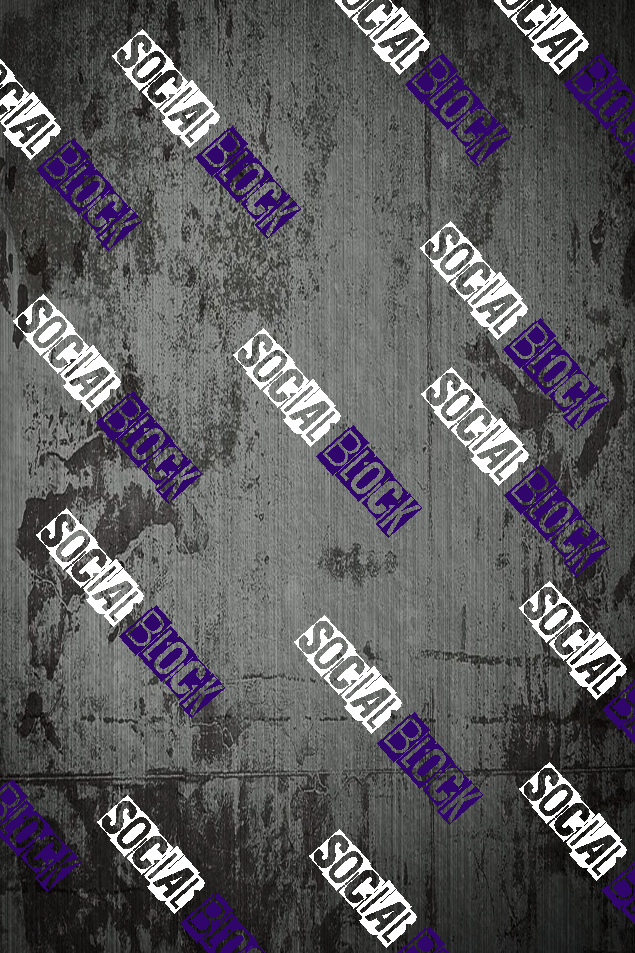
<style>
.page{position:relative;width:635px;height:953px}
.page>*{position:absolute;margin:0}
.t1{font:50px "RedScreenEye";color:#ffffff}
.t2{font:50px "RedScreenEye";color:#31066c}
</style>
<div class="page">
<p class="t1" style="left:112px;top:29px;width:189px;height:210px;rotate:49deg">SOCIAL <span class="t2">BLOCK</span></p>
<p class="t1" style="left:420px;top:221px;width:189px;height:210px;rotate:49deg">SOCIAL <span class="t2">BLOCK</span></p>
<p class="t1" style="left:13px;top:294px;width:189px;height:210px;rotate:49deg">SOCIAL <span class="t2">BLOCK</span></p>
<p class="t1" style="left:233px;top:328px;width:189px;height:210px;rotate:49deg">SOCIAL <span class="t2">BLOCK</span></p>
<p class="t1" style="left:421px;top:367px;width:189px;height:210px;rotate:49deg">SOCIAL <span class="t2">BLOCK</span></p>
<p class="t1" style="left:36px;top:508px;width:189px;height:210px;rotate:49deg">SOCIAL <span class="t2">BLOCK</span></p>
<p class="t1" style="left:294px;top:615px;width:189px;height:210px;rotate:49deg">SOCIAL <span class="t2">BLOCK</span></p>
</div>
